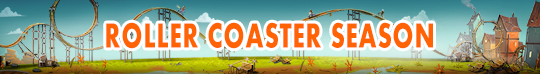
<style>
.page{position:relative;width:540px;height:74px}
.page>*{position:absolute;margin:0}
.t1{font:36px "Aharoni-Bold";letter-spacing:0.04em;color:#ff6304;text-transform:uppercase;scale:0.7 1}
</style>
<div class="page">
<p class="t1" style="left:106px;top:22px;width:327px;height:27px">Roller Coaster Season</p>
</div>
